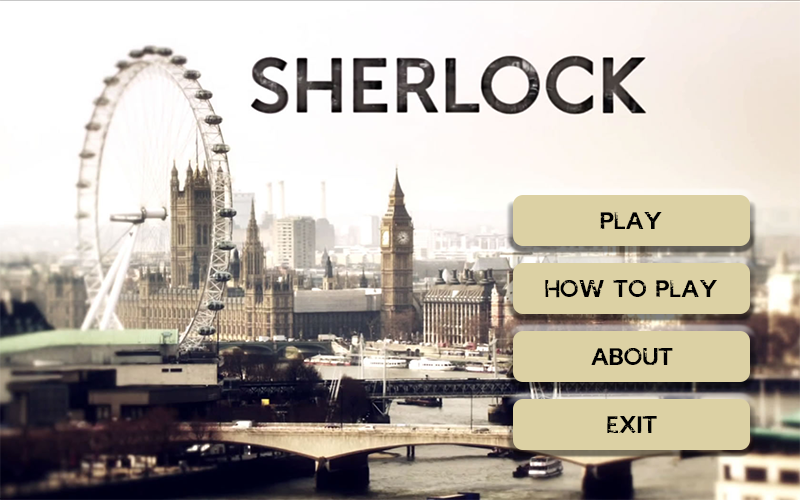
<style>
.page{position:relative;width:800px;height:500px}
.page>*{position:absolute;margin:0}
.t1{font:17px "IAMSHERLOCKED";color:#010101}
.t2{font:17px "IAMSHERLOCKED";color:#000000}
</style>
<div class="page">
<p class="t1" style="left:600px;top:212px;width:62px;height:17px">PLAY</p>
<p class="t2" style="left:545px;top:280px;width:172px;height:18px">HOW TO PLAY</p>
<p class="t2" style="left:591px;top:348px;width:82px;height:17px">ABOUT</p>
<p class="t2" style="left:607px;top:416px;width:50px;height:17px">EXIT</p>
</div>
